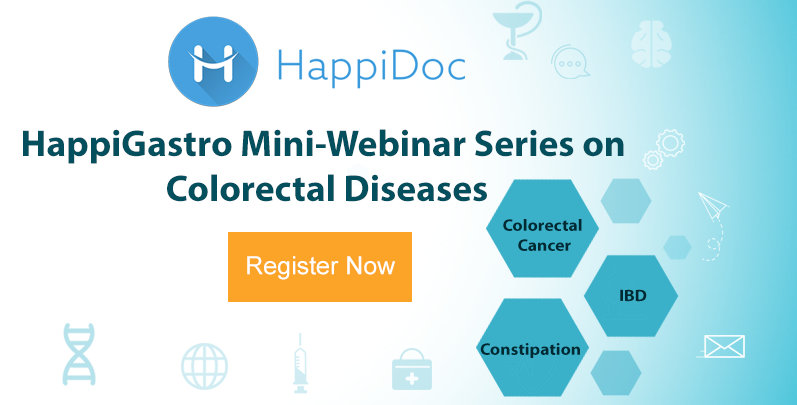
<style>
.page{position:relative;width:797px;height:405px;background:#ffffff}
.page>*{position:absolute;margin:0}
.t1{font:37.5px "MyriadPro-Bold";color:#034f5d}
.t2{font:16.7px "MyriadPro-Bold";color:#012932;scale:1.06 1}
.t3{font:25px "ArialMT";color:#ffffff}
</style>
<div class="page">
<p class="t1" style="left:23px;top:129px;width:601px;height:73px;text-align:center">HappiGastro Mini-Webinar Series on <br>Colorectal Diseases</p>
<p class="t2" style="left:503px;top:219px;width:79px;height:32px;text-align:center">Colorectal <br>Cancer</p>
<p class="t3" style="left:247px;top:256px;width:148px;height:24px">Register Now</p>
<p class="t2" style="left:620px;top:289px;width:27px;height:13px">IBD</p>
<p class="t2" style="left:480px;top:343px;width:100px;height:15px">Constipation</p>
</div>
